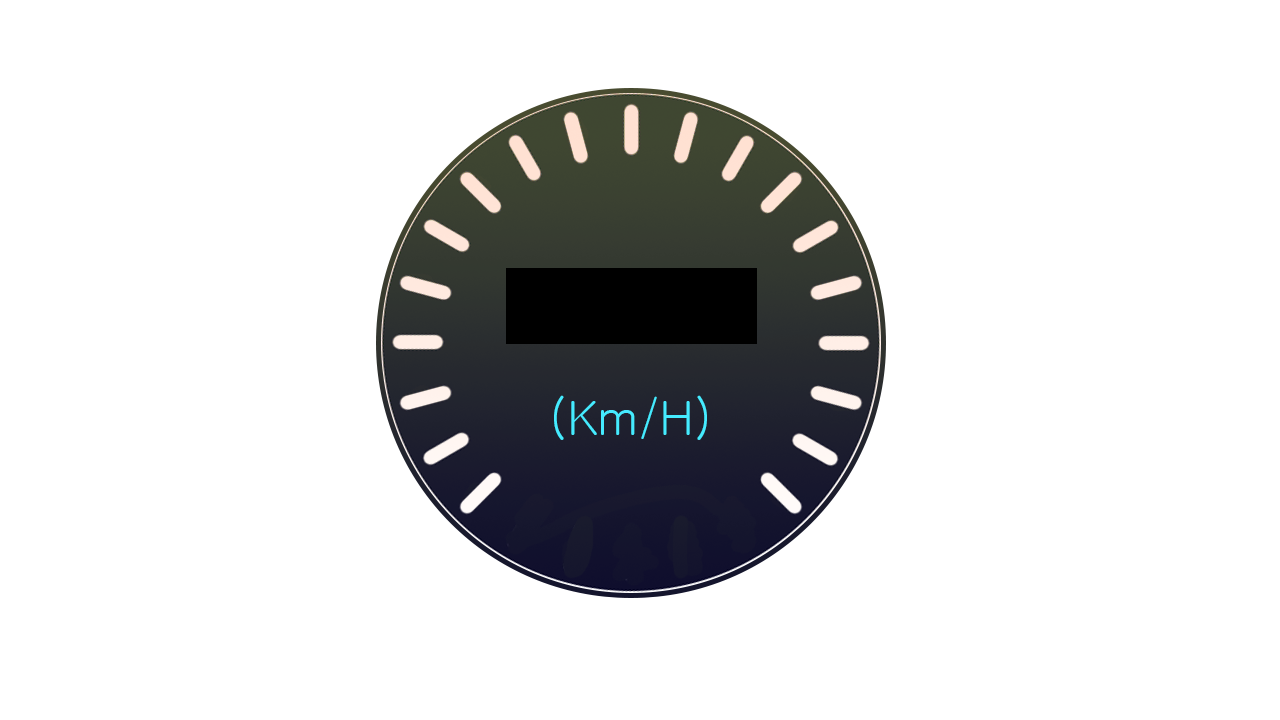
<style>
.page{position:relative;width:1280px;height:720px;background:#ffffff}
.page>*{position:absolute;margin:0}
.t1{font:48px "Gulim";color:#45ebff}
</style>
<div class="page">
<p class="t1" style="left:554px;top:395px;width:153px;height:45px">(Km/H)</p>
</div>
